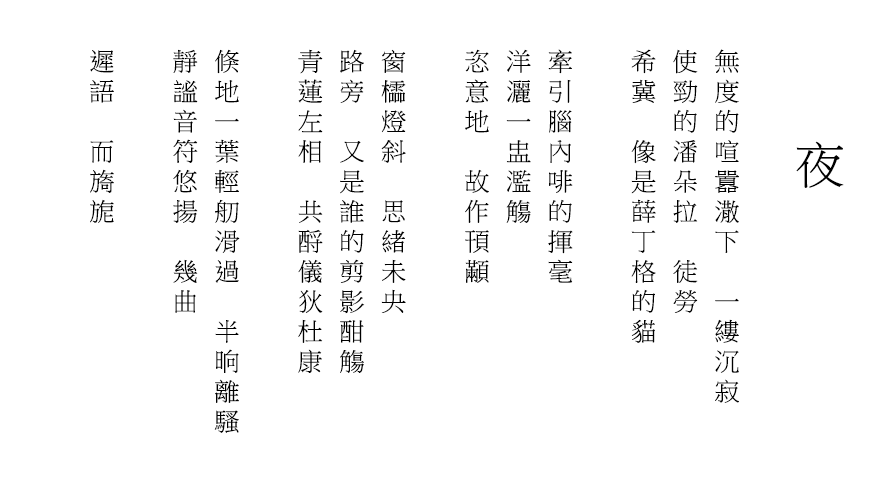
<style>
.page{position:relative;width:875px;height:480px;background:#ffffff}
.page>*{position:absolute;margin:0}
.t1{font:25px/41.7px "PMingLiU";letter-spacing:0.2em;color:#000000}
.t2{font:50px "PMingLiU";color:#000000}
</style>
<div class="page">
<p class="t1" style="left:90px;top:49px;width:649px;height:384px">無度的喧囂潵下　一縷沉寂<br>使勁的潘朵拉　徒勞<br>希冀　像是薛丁格的貓<br><br>牽引腦內啡的揮毫<br>洋灑一盅濫觴<br>恣意地　故作頇顢<br><br>窗櫺燈斜　思緒未央<br>路旁　又是誰的剪影酣觴<br>青蓮左相　共酹儀狄杜康<br><br>倏地一葉輕舠滑過　半晌離騷<br>靜謐音符悠揚　幾曲<br><br>遲語　而旖旎</p>
<p class="t2" style="left:796px;top:141px;width:48px;height:47px">夜</p>
</div>
